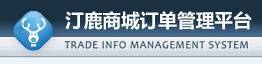
<style>
.page{position:relative;width:262px;height:64px}
.page>*{position:absolute;margin:0}
.t1{font:18.7px "MicrosoftYaHei-Bold";color:#ffffff}
</style>
<div class="page">
<p class="t1" style="left:65px;top:11px;width:187px;height:19px">汀鹿商城订单管理平台</p>
</div>
